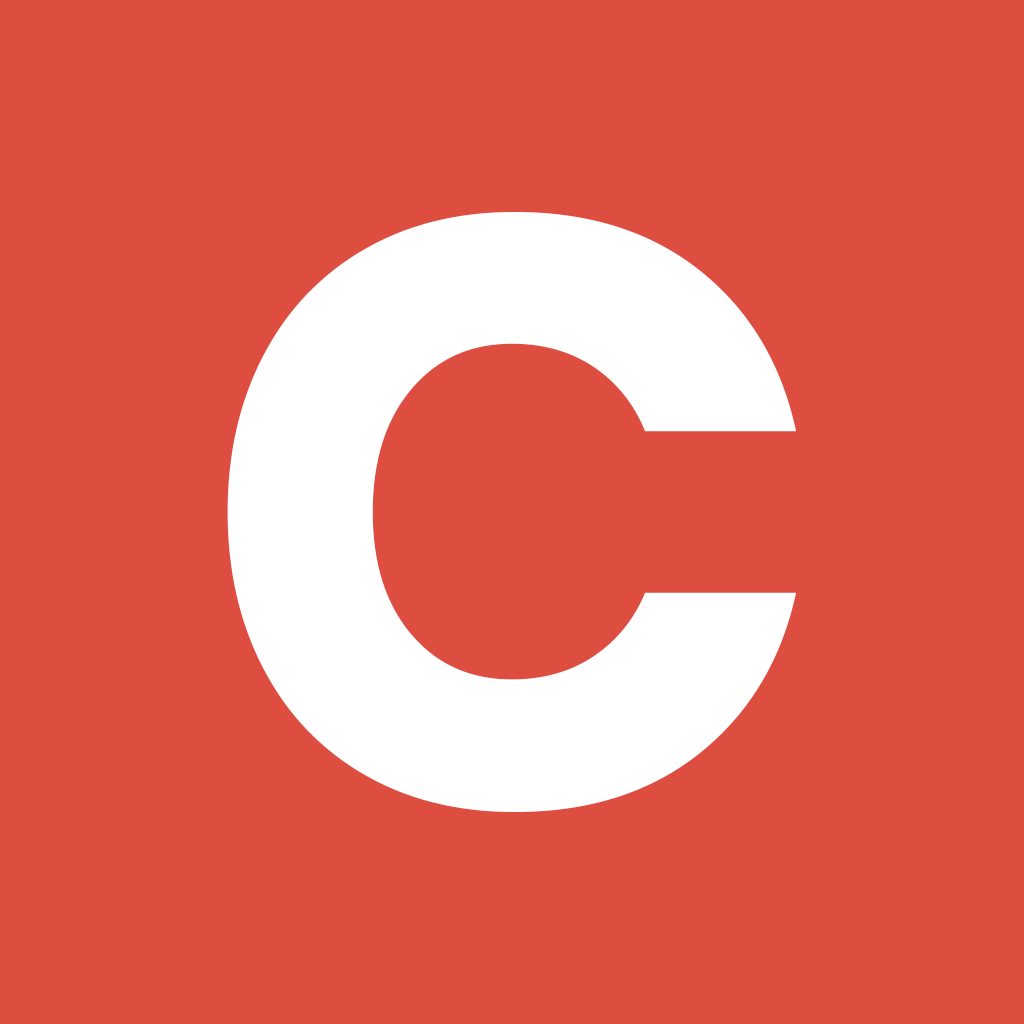
<style>
.page{position:relative;width:1024px;height:1024px;background:#de4e40}
.page>*{position:absolute;margin:0}
.t1{font:833.3px "Poppins-Bold";letter-spacing:0.025em;color:#ffffff}
</style>
<div class="page">
<p class="t1" style="left:227px;top:212px;width:569px;height:600px">C</p>
</div>
